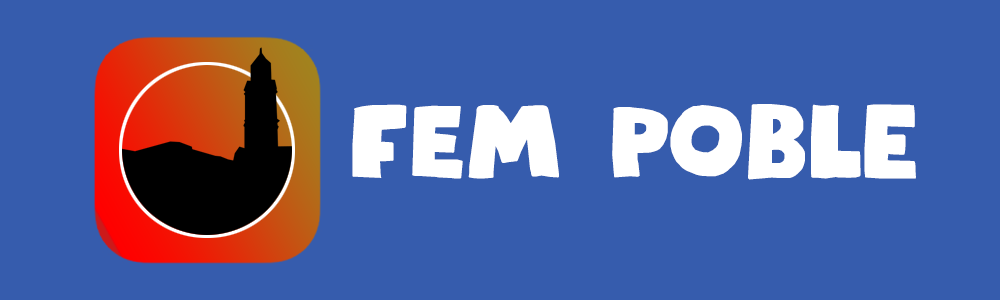
<style>
.page{position:relative;width:1000px;height:300px;background:#365cad}
.page>*{position:absolute;margin:0}
.t1{font:105px "KapsalonDEMO-Regular";color:#ffffff}
</style>
<div class="page">
<p class="t1" style="left:352px;top:104px;width:564px;height:76px">fem POBLE</p>
</div>
